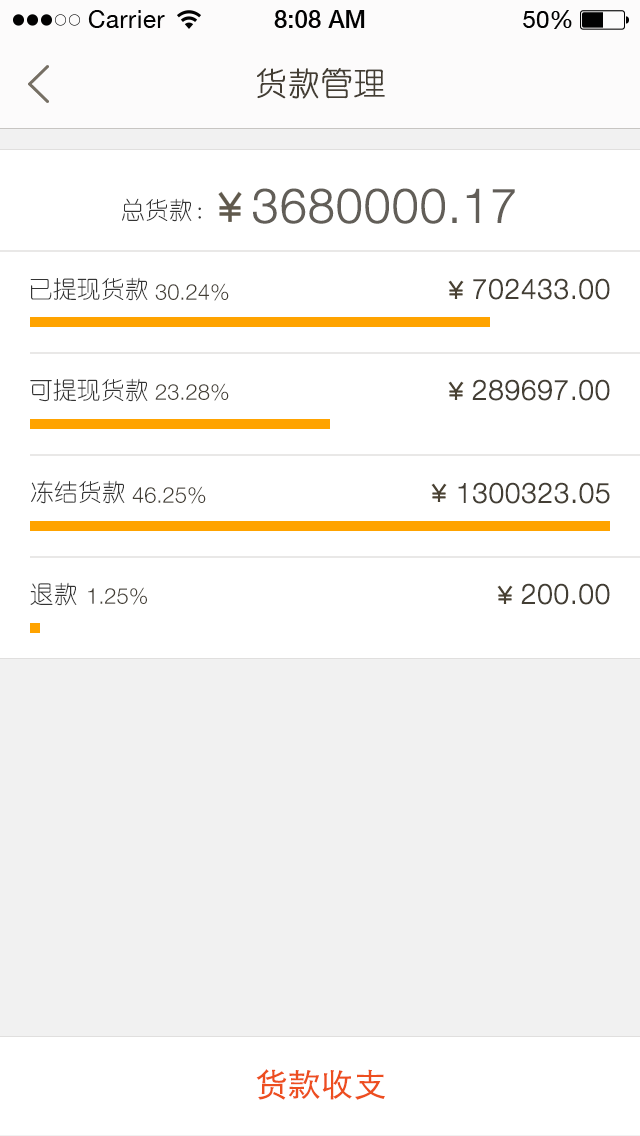
<style>
.page{position:relative;width:640px;height:1136px;background:#ffffff}
.page>*{position:absolute;margin:0}
.t1{font:32px "YouYuan";color:#433d33;text-transform:uppercase;font-weight:bold}
.t2{font:24px "YouYuan";color:#343434;text-transform:uppercase}
.t3{font:48px "HelveticaNeueLTPro-Lt";color:#625e58;text-transform:uppercase;font-weight:bold}
.t4{font:28px "HelveticaNeueLTPro-Lt";color:#433e34;text-transform:uppercase;font-weight:bold}
.t5{font:22px "HelveticaNeueLTPro-Lt";color:#433e34;text-transform:uppercase}
.t6{font:32px "STHeitiSC-Light";color:#ed4e1f;text-transform:uppercase;font-weight:bold}
</style>
<div class="page">
<p class="t1" style="left:257px;top:68px;width:128px;height:31px">货款管理</p>
<p class="t2" style="left:122px;top:198px;width:79px;height:24px">总货款：</p>
<p class="t3" style="left:253px;top:188px;width:262px;height:36px">3680000.17</p>
<p class="t2" style="left:30px;top:277px;width:118px;height:24px">已提现货款</p>
<p class="t4" style="left:473px;top:278px;width:137px;height:22px">702433.00</p>
<p class="t5" style="left:155px;top:283px;width:74px;height:18px">30.24%</p>
<p class="t2" style="left:30px;top:378px;width:118px;height:24px">可提现货款</p>
<p class="t5" style="left:155px;top:383px;width:74px;height:18px">23.28%</p>
<p class="t4" style="left:472px;top:379px;width:138px;height:22px">289697.00</p>
<p class="t2" style="left:31px;top:480px;width:94px;height:24px">冻结货款</p>
<p class="t5" style="left:132px;top:486px;width:74px;height:18px">46.25%</p>
<p class="t4" style="left:458px;top:482px;width:152px;height:22px">1300323.05</p>
<p class="t2" style="left:30px;top:582px;width:47px;height:24px">退款</p>
<p class="t5" style="left:88px;top:587px;width:59px;height:18px">1.25%</p>
<p class="t4" style="left:521px;top:583px;width:89px;height:22px">200.00</p>
<p class="t6" style="left:256px;top:1069px;width:129px;height:31px">货款收支</p>
</div>
